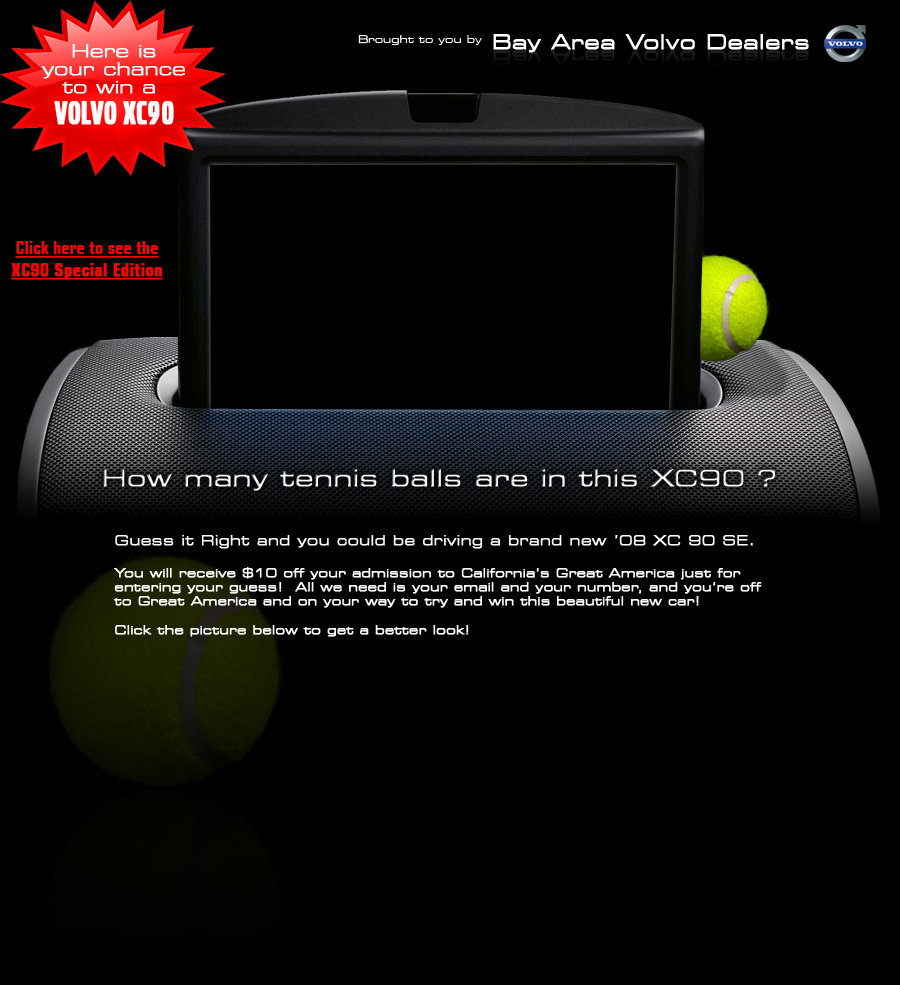
<style>
.page{position:relative;width:900px;height:985px;background:#000000}
.page>*{position:absolute;margin:0}
.t1{font:20px "Square721BT-RomanExtended";color:#ffffff;font-weight:bold}
.t2{font:18px "Square721BT-RomanExtended";color:#ffffff}
.t3{font:18px/18px "Square721BT-RomanExtended";letter-spacing:-0.02em;color:#ffffff;font-weight:bold}
.t4{font:34px/31px "VolvoBroad";color:#ffffff;font-weight:bold}
.t5{font:18px "Square721BT-BoldCondensed";color:#ff0000;text-decoration:underline}
.t6{font:18px "Square721BT-BoldCondensed";color:#ff0000;font-weight:bold;text-decoration:underline}
.t7{font:24px "Square721BT-RomanExtended";font-weight:bold}
.t8{font:12px "Square721BT-RomanExtended";color:#ffffff;font-weight:bold}
.t9{font:14px "Square721BT-RomanExtended";color:#ffffff;font-weight:bold}
</style>
<div class="page">
<p class="t1" style="left:358px;top:34px;width:451px;height:19px"><span class="t2">Brought to you by</span> Bay Area Volvo Dealers</p>
<p class="t3" style="left:41px;top:44px;width:145px;height:81px;text-align:center">Here is<br>your chance<br>to win a <br><span class="t4">VOLVO XC90</span></p>
<p class="t5" style="left:11px;top:241px;width:152px;height:39px;text-align:center">Click here to see the<br><span class="t6">XC90 Special Edition</span></p>
<p class="t7" style="left:103px;top:469px;width:672px;height:22px">How many tennis balls are in this XC90 ?</p>
<p class="t8" style="left:114px;top:535px;width:648px;height:102px"><span class="t9">Guess it Right and you could be driving a brand new ’08 XC 90 SE.<br><br></span>You will receive $10 off your admission to California’s Great America just for <br>entering your guess!  All we need is your email and your number, and you’re off<br>to Great America and on your way to try and win this beautiful new car!<br><br>Click the picture below to get a better look!</p>
</div>
